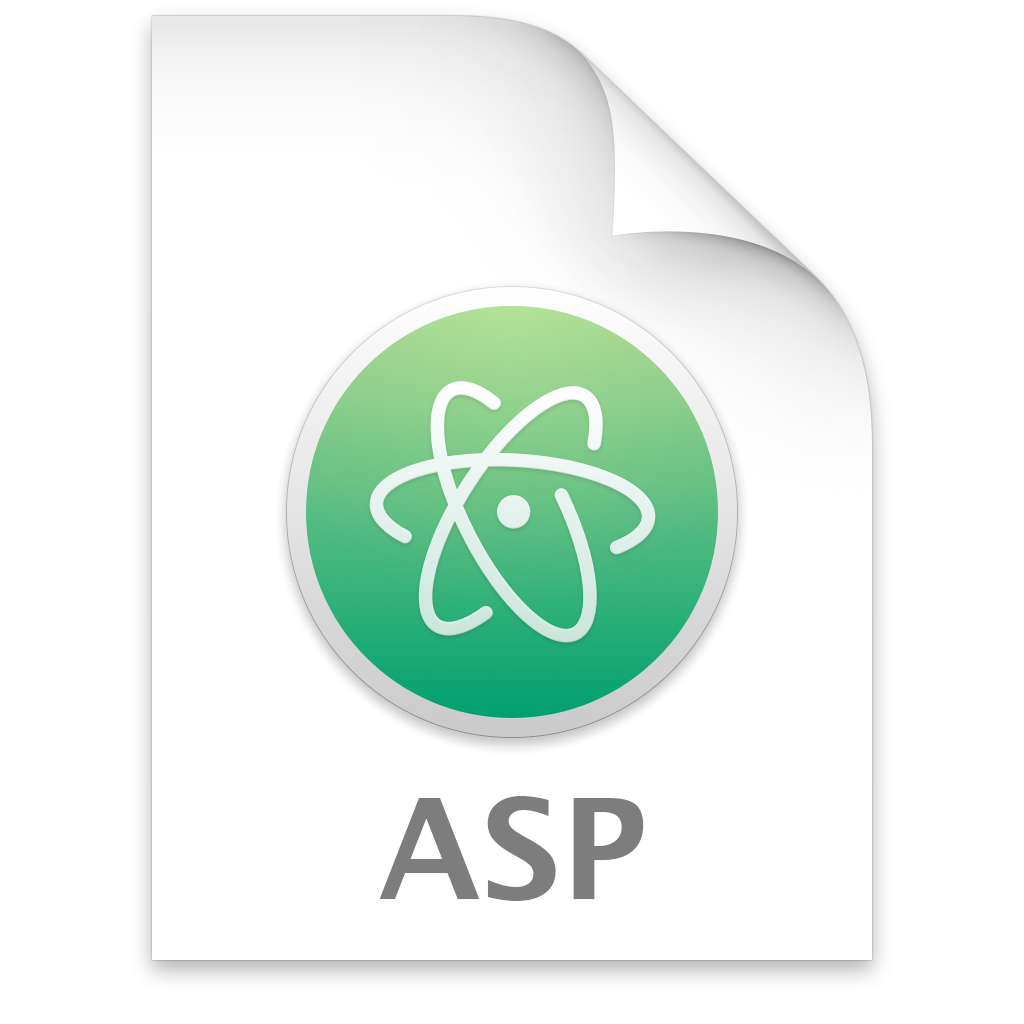
<style>
.page{position:relative;width:1024px;height:1024px;background:#ffffff}
.page>*{position:absolute;margin:0}
.t1{font:140px "LucidaGrande-Bold";color:#7d7d7d}
</style>
<div class="page">
<p class="t1" style="left:379px;top:796px;width:265px;height:105px">ASP</p>
</div>
